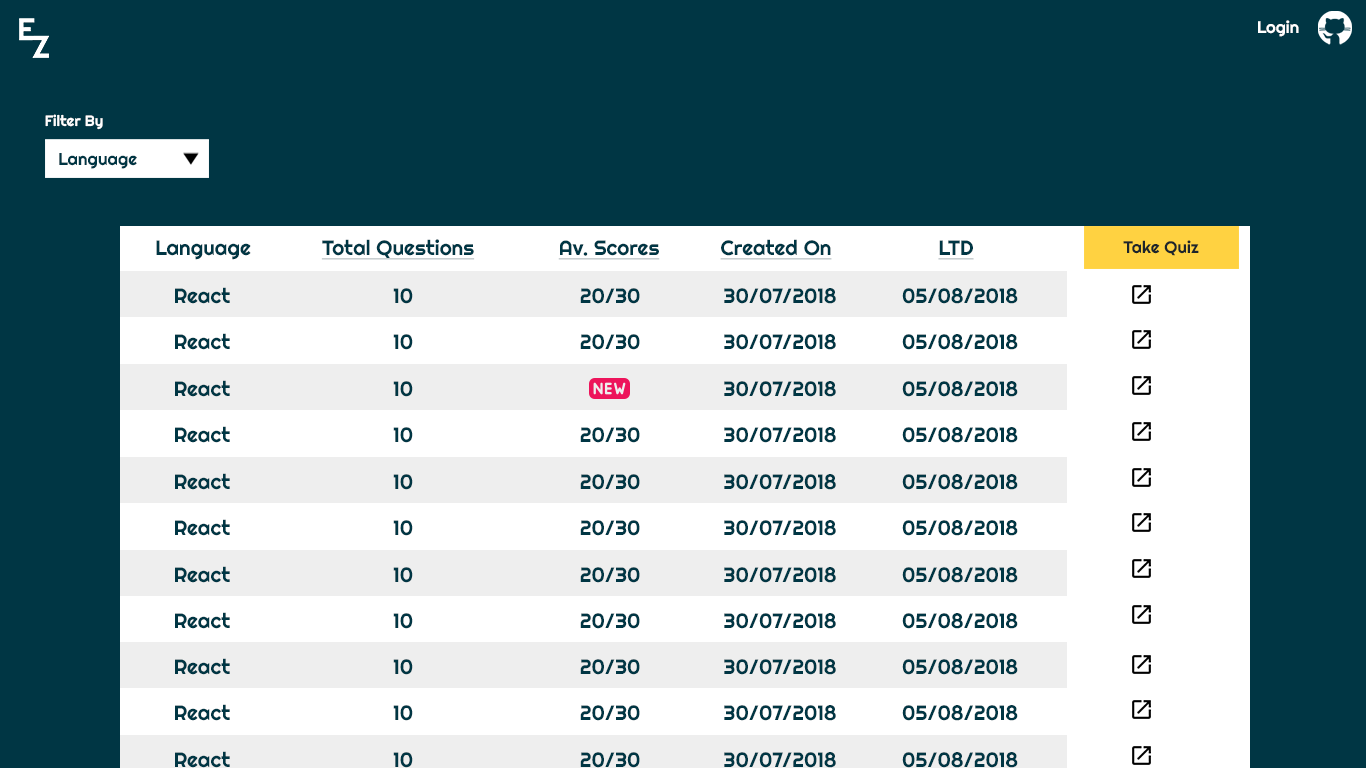
<style>
.page{position:relative;width:1366px;height:768px;background:#003644}
.page>*{position:absolute;margin:0}
.t1{font:16.7px "Righteous-Regular";color:#ffffff}
.t2{font:15.1px "Righteous-Regular";color:#ffffff}
.t3{font:17.2px "Righteous-Regular";color:#003644}
.t4{font:20.7px "Righteous-Regular";color:#003644}
.t5{font:20.7px "Righteous-Regular";color:#003644;text-decoration:underline}
.t6{font:16.8px "Righteous-Regular";color:#1d252c}
</style>
<div class="page">
<p class="t1" style="left:1258px;top:20px;width:41px;height:17px">Login</p>
<p class="t2" style="left:45px;top:114px;width:58px;height:16px">Filter By</p>
<p class="t3" style="left:59px;top:153px;width:78px;height:16px">Language</p>
<p class="t4" style="left:156px;top:240px;width:95px;height:20px">Language</p>
<p class="t5" style="left:321px;top:239px;width:154px;height:21px">Total Questions</p>
<p class="t5" style="left:558px;top:240px;width:102px;height:20px">Av. Scores</p>
<p class="t5" style="left:720px;top:239px;width:112px;height:21px">Created On</p>
<p class="t5" style="left:938px;top:240px;width:36px;height:20px">LTD</p>
<p class="t6" style="left:1123px;top:240px;width:76px;height:16px">Take Quiz</p>
<p class="t4" style="left:175px;top:287px;width:55px;height:17px">React</p>
<p class="t4" style="left:393px;top:288px;width:20px;height:16px">10</p>
<p class="t4" style="left:580px;top:288px;width:60px;height:16px">20/30</p>
<p class="t4" style="left:724px;top:288px;width:112px;height:16px">30/07/2018</p>
<p class="t4" style="left:902px;top:288px;width:116px;height:16px">05/08/2018</p>
<p class="t4" style="left:175px;top:333px;width:55px;height:17px">React</p>
<p class="t4" style="left:393px;top:334px;width:20px;height:16px">10</p>
<p class="t4" style="left:580px;top:334px;width:60px;height:16px">20/30</p>
<p class="t4" style="left:724px;top:334px;width:112px;height:16px">30/07/2018</p>
<p class="t4" style="left:902px;top:334px;width:116px;height:16px">05/08/2018</p>
<p class="t4" style="left:175px;top:380px;width:55px;height:17px">React</p>
<p class="t4" style="left:393px;top:381px;width:20px;height:16px">10</p>
<p class="t4" style="left:724px;top:381px;width:112px;height:16px">30/07/2018</p>
<p class="t4" style="left:902px;top:381px;width:116px;height:16px">05/08/2018</p>
<p class="t4" style="left:175px;top:426px;width:55px;height:17px">React</p>
<p class="t4" style="left:393px;top:427px;width:20px;height:16px">10</p>
<p class="t4" style="left:580px;top:427px;width:60px;height:16px">20/30</p>
<p class="t4" style="left:724px;top:427px;width:112px;height:16px">30/07/2018</p>
<p class="t4" style="left:902px;top:427px;width:116px;height:16px">05/08/2018</p>
<p class="t4" style="left:175px;top:473px;width:55px;height:17px">React</p>
<p class="t4" style="left:393px;top:474px;width:20px;height:16px">10</p>
<p class="t4" style="left:580px;top:474px;width:60px;height:16px">20/30</p>
<p class="t4" style="left:724px;top:474px;width:112px;height:16px">30/07/2018</p>
<p class="t4" style="left:902px;top:474px;width:116px;height:16px">05/08/2018</p>
<p class="t4" style="left:175px;top:519px;width:55px;height:17px">React</p>
<p class="t4" style="left:393px;top:520px;width:20px;height:16px">10</p>
<p class="t4" style="left:580px;top:520px;width:60px;height:16px">20/30</p>
<p class="t4" style="left:724px;top:520px;width:112px;height:16px">30/07/2018</p>
<p class="t4" style="left:902px;top:520px;width:116px;height:16px">05/08/2018</p>
<p class="t4" style="left:175px;top:566px;width:55px;height:17px">React</p>
<p class="t4" style="left:393px;top:567px;width:20px;height:16px">10</p>
<p class="t4" style="left:580px;top:567px;width:60px;height:16px">20/30</p>
<p class="t4" style="left:724px;top:567px;width:112px;height:16px">30/07/2018</p>
<p class="t4" style="left:902px;top:567px;width:116px;height:16px">05/08/2018</p>
<p class="t4" style="left:175px;top:612px;width:55px;height:17px">React</p>
<p class="t4" style="left:393px;top:613px;width:20px;height:16px">10</p>
<p class="t4" style="left:580px;top:613px;width:60px;height:16px">20/30</p>
<p class="t4" style="left:724px;top:613px;width:112px;height:16px">30/07/2018</p>
<p class="t4" style="left:902px;top:613px;width:116px;height:16px">05/08/2018</p>
<p class="t4" style="left:175px;top:658px;width:55px;height:17px">React</p>
<p class="t4" style="left:393px;top:659px;width:20px;height:16px">10</p>
<p class="t4" style="left:580px;top:659px;width:60px;height:16px">20/30</p>
<p class="t4" style="left:724px;top:659px;width:112px;height:16px">30/07/2018</p>
<p class="t4" style="left:902px;top:659px;width:116px;height:16px">05/08/2018</p>
<p class="t4" style="left:175px;top:704px;width:55px;height:17px">React</p>
<p class="t4" style="left:393px;top:705px;width:20px;height:16px">10</p>
<p class="t4" style="left:580px;top:705px;width:60px;height:16px">20/30</p>
<p class="t4" style="left:724px;top:705px;width:112px;height:16px">30/07/2018</p>
<p class="t4" style="left:902px;top:705px;width:116px;height:16px">05/08/2018</p>
<p class="t4" style="left:175px;top:751px;width:55px;height:17px">React</p>
<p class="t4" style="left:393px;top:752px;width:20px;height:16px">10</p>
<p class="t4" style="left:580px;top:752px;width:60px;height:16px">20/30</p>
<p class="t4" style="left:724px;top:752px;width:112px;height:16px">30/07/2018</p>
<p class="t4" style="left:902px;top:752px;width:116px;height:16px">05/08/2018</p>
</div>
